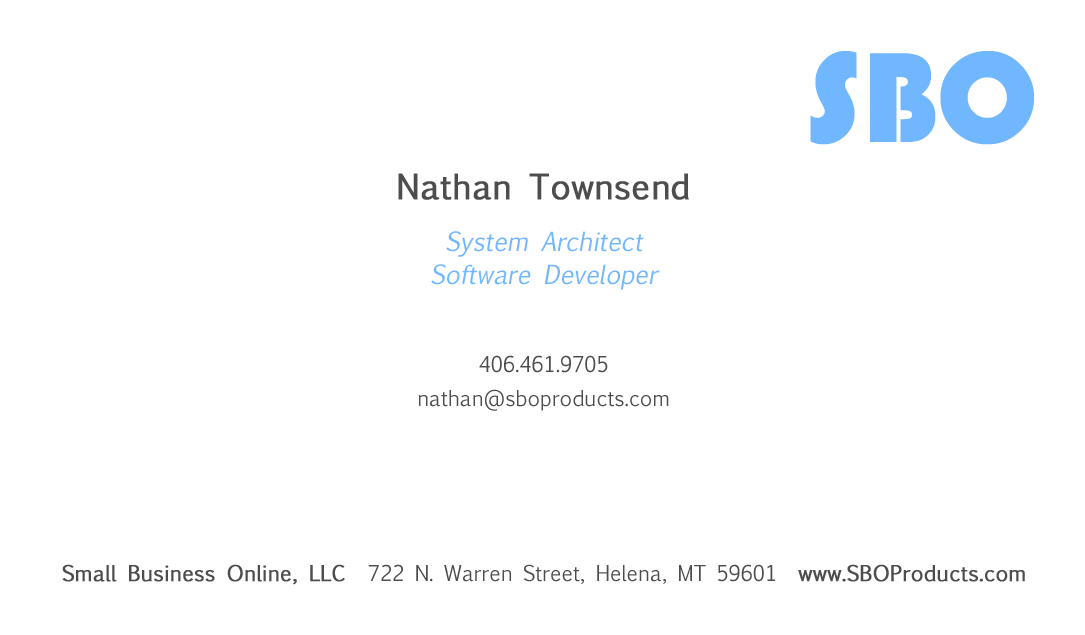
<style>
.page{position:relative;width:1085px;height:635px;background:#ffffff}
.page>*{position:absolute;margin:0}
.t1{font:133.3px "Bauhaus93";color:#71b7ff}
.t2{font:33.3px "EuphemiaCAS";color:#4d4d4d;font-weight:bold}
.t3{font:25px/33.3px "EuphemiaCAS";color:#71b7ff;font-style:italic}
.t4{font:20.8px/33.3px "EuphemiaCAS";color:#4d4d4d}
.t5{font:20.8px "EuphemiaCAS";color:#4d4d4d}
.t6{font:20.8px "EuphemiaCAS";color:#4d4d4d;font-weight:bold}
</style>
<div class="page">
<p class="t1" style="left:810px;top:51px;width:224px;height:94px">SBO</p>
<p class="t2" style="left:398px;top:173px;width:291px;height:27px">Nathan Townsend</p>
<p class="t3" style="left:431px;top:231px;width:229px;height:59px;text-align:center">System Architect<br>Software Developer</p>
<p class="t4" style="left:419px;top:355px;width:250px;height:56px;text-align:center">406.461.9705<br>nathan@sboproducts.com</p>
<p class="t5" style="left:62px;top:564px;width:963px;height:21px"><span class="t6">Small Business Online, LLC  </span>722 N. Warren Street, Helena, MT 59601  <span class="t6">www.SBOProducts.com</span></p>
</div>
